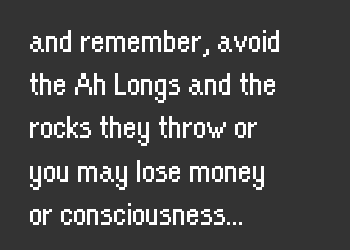
<style>
.page{position:relative;width:350px;height:250px;background:#333333}
.page>*{position:absolute;margin:0}
.t1{font:36px "OrangeKid-Regular";color:#ffffff}
</style>
<div class="page">
<p class="t1" style="left:30px;top:30px;width:249px;height:195px">and remember, avoid <br>the Ah Longs and the <br>rocks they throw or <br>you may lose money <br>or consciousness...</p>
</div>
